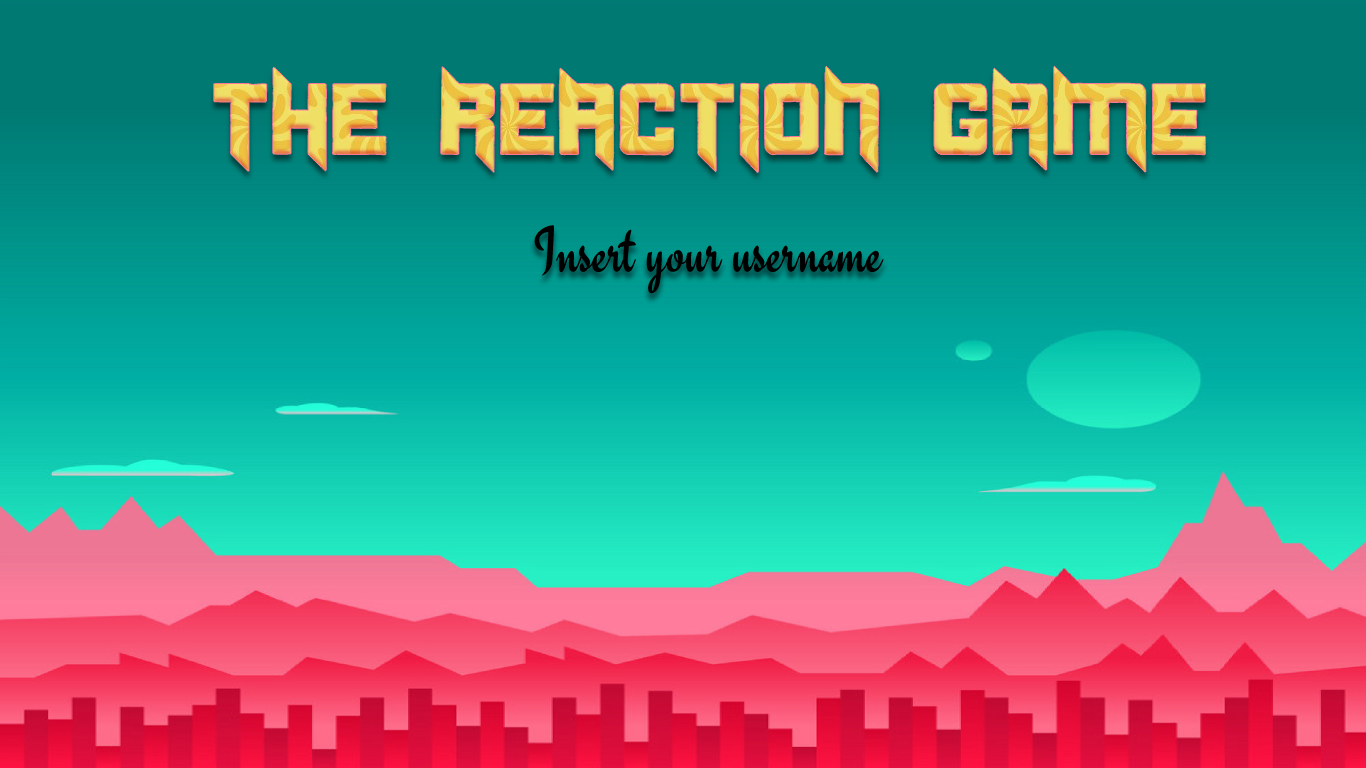
<style>
.page{position:relative;width:1366px;height:768px}
.page>*{position:absolute;margin:0}
.t1{font:100px "Duplexide"}
.t2{font:66px "Engagement-Regular";color:#000000}
</style>
<div class="page">
<p class="t1" style="left:214px;top:66px;width:992px;height:107px">THE REACTION GAME</p>
<p class="t2" style="left:534px;top:225px;width:350px;height:69px">Insert your username</p>
</div>
